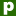
<style>
.page{position:relative;width:16px;height:16px;background:#286c03}
.page>*{position:absolute;margin:0}
.t1{font:17px "Swiss721BT-Black";letter-spacing:0.01em;color:#ffffff}
</style>
<div class="page">
<p class="t1" style="left:3px;top:1px;width:11px;height:14px">p</p>
</div>
